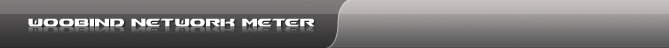
<style>
.page{position:relative;width:669px;height:48px}
.page>*{position:absolute;margin:0}
.t1{font:14.8px "Ben-Pioneer-Bold";color:#ffffff;scale:0.94 1}
.t2{font:14.8px "Ben-Pioneer-Bold";scale:0.94 1}
</style>
<div class="page">
<p class="t1" style="left:28px;top:18px;width:287px;height:9px">WOOBIND NETWORK METER</p>
<p class="t2" style="left:28px;top:26px;width:287px;height:8px">WOOBIND NETWORK METER</p>
</div>
